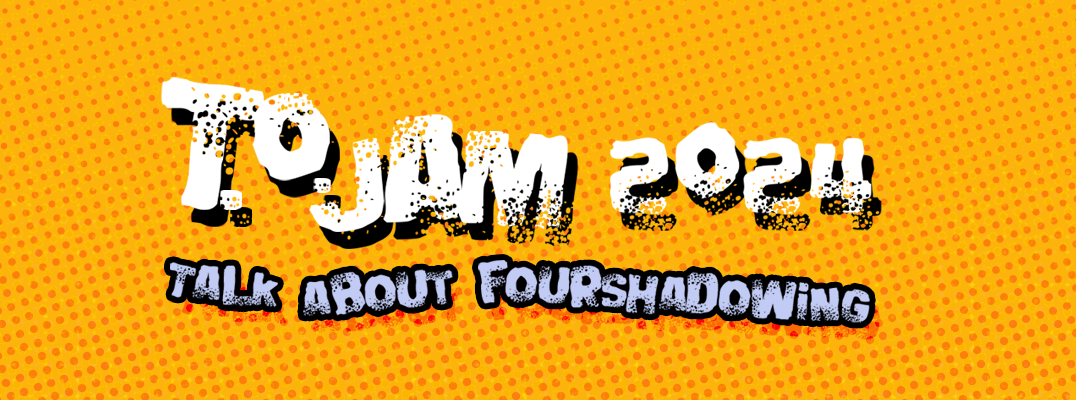
<style>
.page{position:relative;width:1076px;height:400px;background:#fcb30b}
.page>*{position:absolute;margin:0}
.t1{font:255.2px "BigBlokeBB";color:#ffffff}
.t2{font:191.4px "BigBlokeBB";color:#ffffff}
.t3{font:172.3px "BigBlokeBB";color:#ffffff}
.t4{font:149.2px "BigBlokeBB";color:#ffffff}
.t5{font:165.9px "BigBlokeBB";color:#ffffff}
.t6{font:114.9px "BigBlokeBB";color:#ffffff}
.t7{font:153.1px "BigBlokeBB";color:#ffffff}
.t8{font:65.8px "BigBlokeBB";color:#c1cbf3}
</style>
<div class="page">
<p class="t1" style="left:161px;top:77px;width:103px;height:133px">T</p>
<p class="t2" style="left:252px;top:93px;width:78px;height:88px">O</p>
<p class="t3" style="left:383px;top:114px;width:89px;height:109px">A</p>
<p class="t4" style="left:610px;top:122px;width:262px;height:92px">2024</p>
<p class="t3" style="left:459px;top:131px;width:109px;height:98px">M</p>
<p class="t5" style="left:309px;top:138px;width:76px;height:94px">J</p>
<p class="t6" style="left:313px;top:178px;width:18px;height:15px">.</p>
<p class="t7" style="left:220px;top:190px;width:22px;height:20px">.</p>
<p class="t8" style="left:170px;top:262px;width:108px;height:45px;rotate:6deg">Talk</p>
<p class="t8" style="left:303px;top:269px;width:150px;height:47px;rotate:-5deg">about</p>
<p class="t8" style="left:478px;top:260px;width:392px;height:63px;rotate:4deg">fourshadowing</p>
</div>
